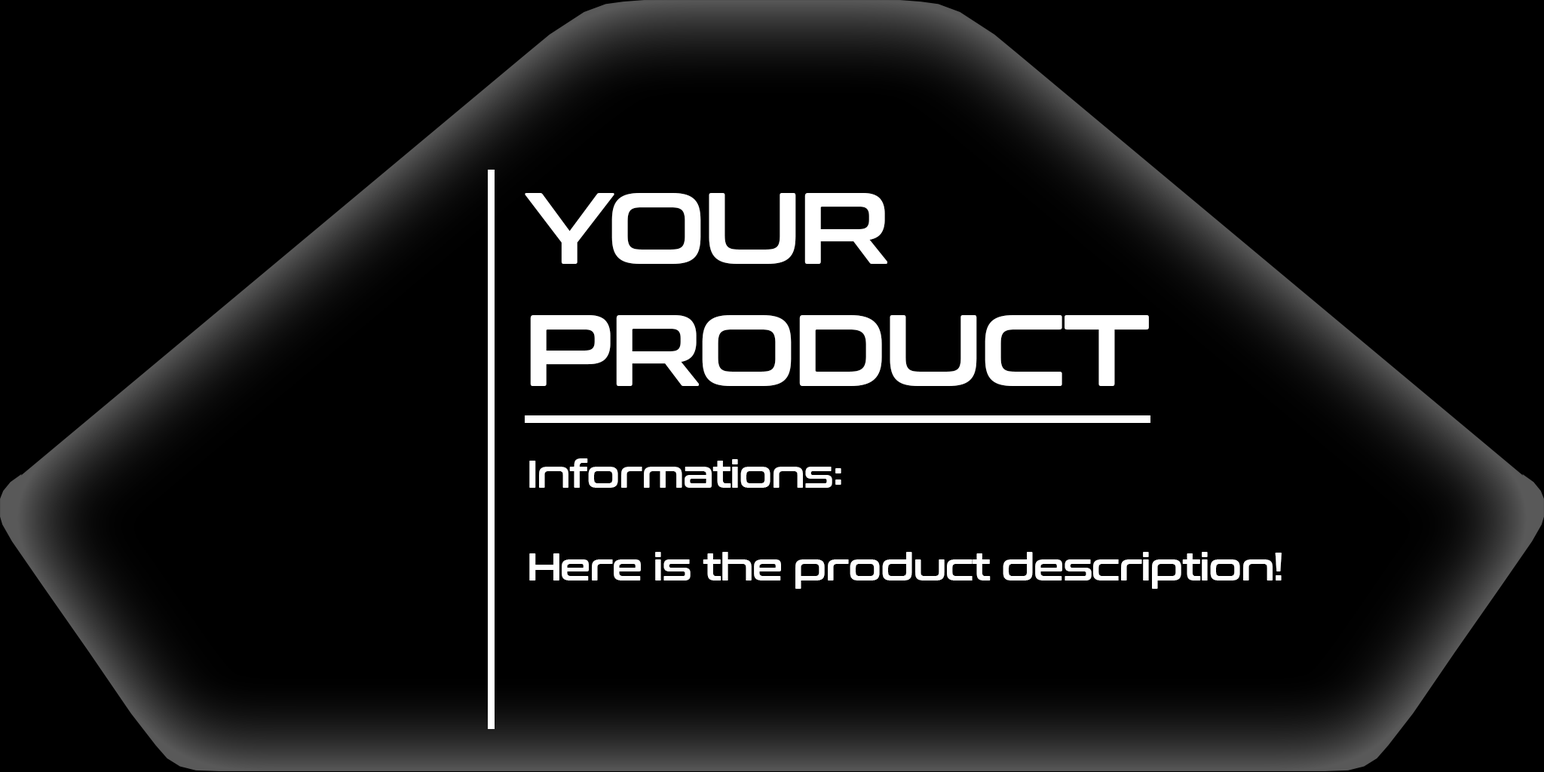
<style>
.page{position:relative;width:1544px;height:772px;background:#000000}
.page>*{position:absolute;margin:0}
.t1{font:101.6px "ConthraxSb-Regular";letter-spacing:-0.035em;color:#ffffff}
.t2{font:38.7px "ConthraxSb-Regular";letter-spacing:-0.035em;color:#ffffff}
</style>
<div class="page">
<p class="t1" style="left:525px;top:193px;width:624px;height:193px">YOUR<br>PRODUCT</p>
<p class="t2" style="left:529px;top:458px;width:753px;height:131px">Informations:<br><br>Here is the product description!</p>
</div>
